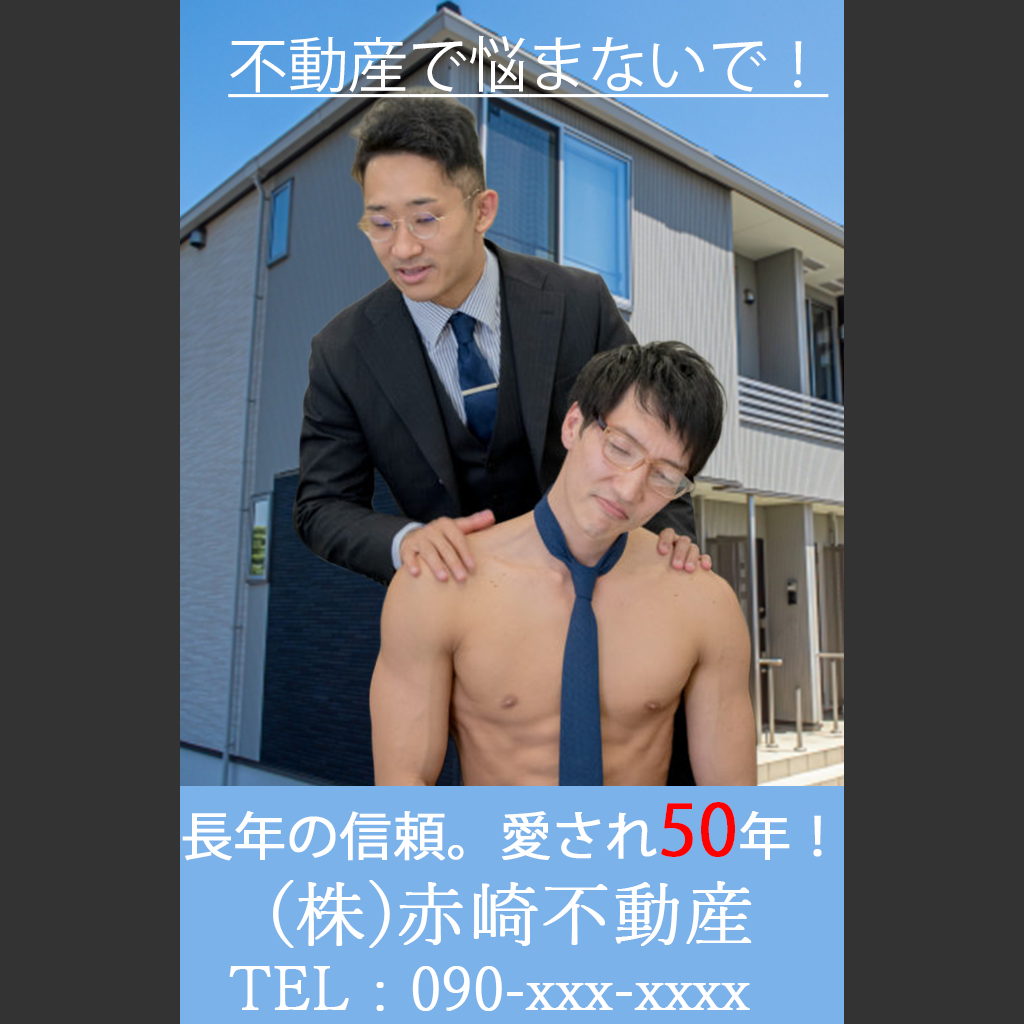
<style>
.page{position:relative;width:1024px;height:1024px;background:#333333}
.page>*{position:absolute;margin:0}
.t1{font:60px "KozGoPr6N-Regular";color:#ffffff;text-decoration:underline}
.t2{font:51.8px "KozGoPr6N-Regular";color:#ffffff;font-weight:bold}
.t3{font:69px "KozGoPr6N-Regular";color:#ff0000;font-weight:bold}
.t4{font:70.3px "YuMincho-Light";color:#ffffff;font-weight:bold}
.t5{font:60px "YuMincho-Light";color:#ffffff;font-weight:bold}
</style>
<div class="page">
<p class="t1" style="left:228px;top:35px;width:601px;height:63px">不動産で悩まないで！</p>
<p class="t2" style="left:182px;top:802px;width:640px;height:59px">長年の信頼。愛され<span class="t3">50</span>年！</p>
<p class="t4" style="left:273px;top:880px;width:479px;height:68px">(株)赤崎不動産</p>
<p class="t5" style="left:229px;top:966px;width:521px;height:45px">TEL : 090-xxx-xxxx</p>
</div>
